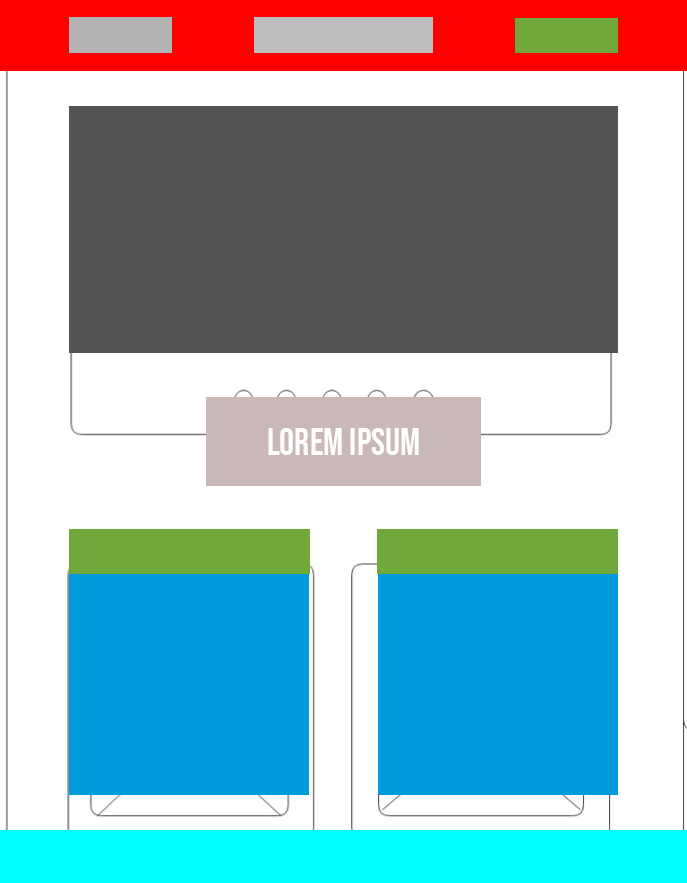
<style>
.page{position:relative;width:687px;height:883px;background:#ffffff}
.page>*{position:absolute;margin:0}
.t1{font:37.5px "BebasNeue-Regular";color:#ffffff}
</style>
<div class="page">
<p class="t1" style="left:268px;top:428px;width:151px;height:27px">Lorem ipsum</p>
</div>
